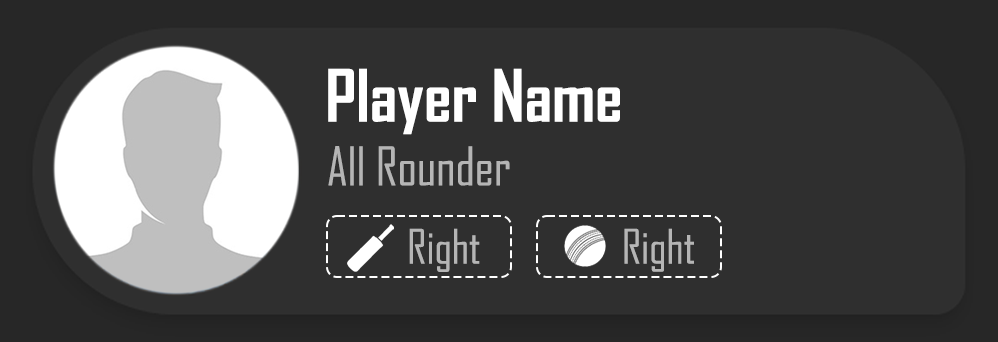
<style>
.page{position:relative;width:998px;height:342px;background:#2f2f2f}
.page>*{position:absolute;margin:0}
.t1{font:69px "AgencyFB-Bold";color:#ffffff}
.t2{font:51.1px "AgencyFB-Reg";color:#b5b5b5}
.t3{font:45.5px "AgencyFB-Reg";color:#b5b5b5}
</style>
<div class="page">
<p class="t1" style="left:328px;top:68px;width:292px;height:67px">Player Name</p>
<p class="t2" style="left:328px;top:146px;width:182px;height:40px">All Rounder</p>
<p class="t3" style="left:409px;top:228px;width:71px;height:44px">Right</p>
<p class="t3" style="left:624px;top:228px;width:70px;height:44px">Right</p>
</div>
